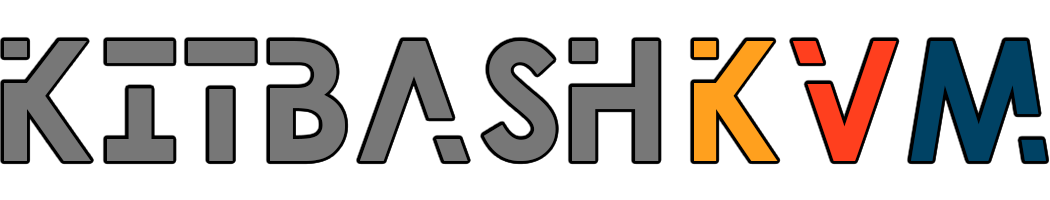
<style>
.page{position:relative;width:1050px;height:200px;background:#ffffff}
.page>*{position:absolute;margin:0}
.t1{font:170.6px "ProcrastinatingPixie";color:#777777}
.t2{font:170.6px "ProcrastinatingPixie";color:#ffa01e;scale:0.96 1}
.t3{font:170.6px "ProcrastinatingPixie";color:#ff3f1e;scale:0.96 1}
.t4{font:170.6px "ProcrastinatingPixie";color:#004264;scale:0.96 1}
</style>
<div class="page">
<p class="t1" style="left:4px;top:41px;width:655px;height:120px">KITBASH</p>
<p class="t2" style="left:694px;top:41px;width:352px;height:120px">K<span class="t3">V</span><span class="t4">M</span></p>
</div>
